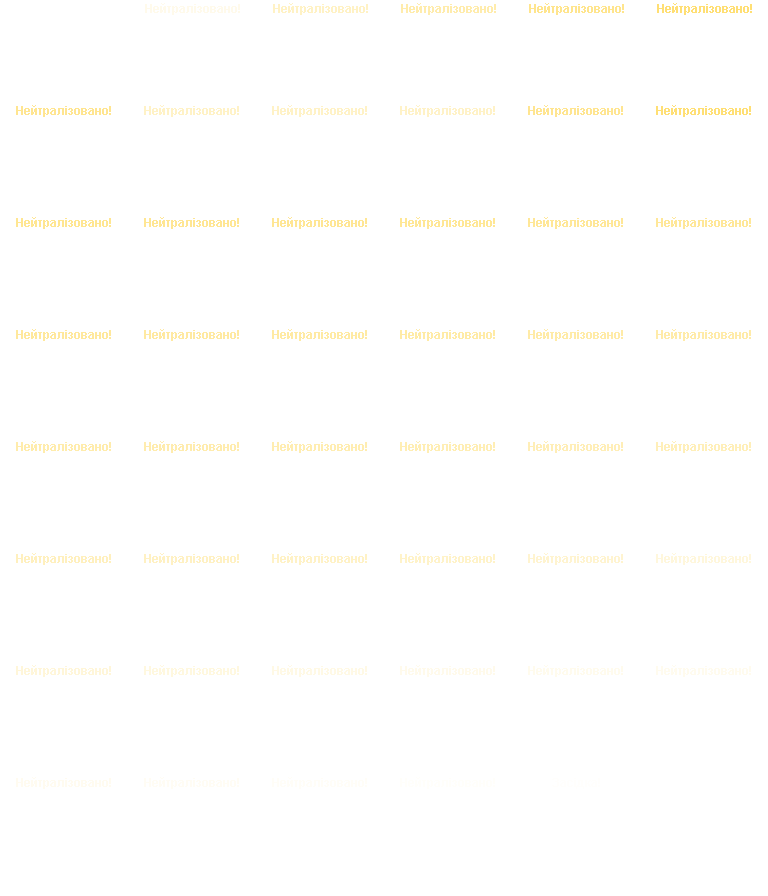
<style>
.page{position:relative;width:768px;height:896px;background:#ffffff}
.page>*{position:absolute;margin:0}
.t1{font:12px "Arial-BoldMT";color:#fffaeb}
.t2{font:12px "Arial-BoldMT";color:#fff2c5}
.t3{font:12px "Arial-BoldMT";color:#ffecac}
.t4{font:12px "Arial-BoldMT";color:#ffe58d}
.t5{font:12px "Arial-BoldMT";color:#ffdf74}
.t6{font:12px "Arial-BoldMT";color:#ffe590}
.t7{font:12px "Arial-BoldMT";color:#fff2c6}
.t8{font:12px "Arial-BoldMT";color:#fff2c7}
.t9{font:12px "Arial-BoldMT";color:#ffe691}
.t10{font:12px "Arial-BoldMT";color:#ffe693}
.t11{font:12px "Arial-BoldMT";color:#ffe694}
.t12{font:12px "Arial-BoldMT";color:#ffe795}
.t13{font:12px "Arial-BoldMT";color:#ffe797}
.t14{font:12px "Arial-BoldMT";color:#ffe798}
.t15{font:12px "Arial-BoldMT";color:#ffe89c}
.t16{font:12px "Arial-BoldMT";color:#ffe9a1}
.t17{font:12px "Arial-BoldMT";color:#ffeaa3}
.t18{font:12px "Arial-BoldMT";color:#ffeba6}
.t19{font:12px "Arial-BoldMT";color:#ffeba7}
.t20{font:12px "Arial-BoldMT";color:#ffeba9}
.t21{font:12px "Arial-BoldMT";color:#ffecae}
.t22{font:12px "Arial-BoldMT";color:#ffedb1}
.t23{font:12px "Arial-BoldMT";color:#ffeeb4}
.t24{font:12px "Arial-BoldMT";color:#ffeeb7}
.t25{font:12px "Arial-BoldMT";color:#ffefb9}
.t26{font:12px "Arial-BoldMT";color:#fff0be}
.t27{font:12px "Arial-BoldMT";color:#fff1c3}
.t28{font:12px "Arial-BoldMT";color:#fff3c9}
.t29{font:12px "Arial-BoldMT";color:#fff4d0}
.t30{font:12px "Arial-BoldMT";color:#fff7dc}
.t31{font:12px "Arial-BoldMT";color:#fff6d9}
.t32{font:12px "Arial-BoldMT";color:#fff8df}
.t33{font:12px "Arial-BoldMT";color:#fff9e5}
.t34{font:12px "Arial-BoldMT";color:#fffbed}
.t35{font:12px "Arial-BoldMT";color:#fffbee}
.t36{font:12px "Arial-BoldMT";color:#fffbf0}
.t37{font:12px "Arial-BoldMT";color:#fffcf4}
.t38{font:12px "Arial-BoldMT";color:#fffdf7}
.t39{font:12px "Arial-BoldMT";color:#fffefa}
</style>
<div class="page">
<p class="t1" style="left:145px;top:3px;width:95px;height:12px">Нейтралізовано!</p>
<p class="t2" style="left:273px;top:3px;width:95px;height:12px">Нейтралізовано!</p>
<p class="t3" style="left:401px;top:3px;width:95px;height:12px">Нейтралізовано!</p>
<p class="t4" style="left:529px;top:3px;width:95px;height:12px">Нейтралізовано!</p>
<p class="t5" style="left:657px;top:3px;width:95px;height:12px">Нейтралізовано!</p>
<p class="t6" style="left:16px;top:105px;width:95px;height:12px">Нейтралізовано!</p>
<p class="t7" style="left:144px;top:105px;width:95px;height:12px">Нейтралізовано!</p>
<p class="t7" style="left:272px;top:105px;width:95px;height:12px">Нейтралізовано!</p>
<p class="t8" style="left:400px;top:105px;width:95px;height:12px">Нейтралізовано!</p>
<p class="t6" style="left:528px;top:105px;width:95px;height:12px">Нейтралізовано!</p>
<p class="t5" style="left:656px;top:105px;width:95px;height:12px">Нейтралізовано!</p>
<p class="t9" style="left:16px;top:217px;width:95px;height:12px">Нейтралізовано!</p>
<p class="t10" style="left:144px;top:217px;width:95px;height:12px">Нейтралізовано!</p>
<p class="t11" style="left:272px;top:217px;width:95px;height:12px">Нейтралізовано!</p>
<p class="t12" style="left:400px;top:217px;width:95px;height:12px">Нейтралізовано!</p>
<p class="t13" style="left:528px;top:217px;width:95px;height:12px">Нейтралізовано!</p>
<p class="t14" style="left:656px;top:217px;width:95px;height:12px">Нейтралізовано!</p>
<p class="t15" style="left:16px;top:329px;width:95px;height:12px">Нейтралізовано!</p>
<p class="t16" style="left:144px;top:329px;width:95px;height:12px">Нейтралізовано!</p>
<p class="t17" style="left:272px;top:329px;width:95px;height:12px">Нейтралізовано!</p>
<p class="t18" style="left:400px;top:329px;width:95px;height:12px">Нейтралізовано!</p>
<p class="t19" style="left:528px;top:329px;width:95px;height:12px">Нейтралізовано!</p>
<p class="t20" style="left:656px;top:329px;width:95px;height:12px">Нейтралізовано!</p>
<p class="t3" style="left:16px;top:441px;width:95px;height:12px">Нейтралізовано!</p>
<p class="t21" style="left:144px;top:441px;width:95px;height:12px">Нейтралізовано!</p>
<p class="t22" style="left:272px;top:441px;width:95px;height:12px">Нейтралізовано!</p>
<p class="t23" style="left:400px;top:441px;width:95px;height:12px">Нейтралізовано!</p>
<p class="t24" style="left:528px;top:441px;width:95px;height:12px">Нейтралізовано!</p>
<p class="t25" style="left:656px;top:441px;width:95px;height:12px">Нейтралізовано!</p>
<p class="t26" style="left:16px;top:553px;width:95px;height:12px">Нейтралізовано!</p>
<p class="t27" style="left:144px;top:553px;width:95px;height:12px">Нейтралізовано!</p>
<p class="t7" style="left:272px;top:553px;width:95px;height:12px">Нейтралізовано!</p>
<p class="t28" style="left:400px;top:553px;width:95px;height:12px">Нейтралізовано!</p>
<p class="t29" style="left:528px;top:553px;width:95px;height:12px">Нейтралізовано!</p>
<p class="t30" style="left:656px;top:553px;width:95px;height:12px">Нейтралізовано!</p>
<p class="t31" style="left:16px;top:665px;width:95px;height:12px">Нейтралізовано!</p>
<p class="t32" style="left:144px;top:665px;width:95px;height:12px">Нейтралізовано!</p>
<p class="t33" style="left:272px;top:665px;width:95px;height:12px">Нейтралізовано!</p>
<p class="t1" style="left:400px;top:665px;width:95px;height:12px">Нейтралізовано!</p>
<p class="t34" style="left:528px;top:665px;width:95px;height:12px">Нейтралізовано!</p>
<p class="t35" style="left:656px;top:665px;width:95px;height:12px">Нейтралізовано!</p>
<p class="t36" style="left:16px;top:777px;width:95px;height:12px">Нейтралізовано!</p>
<p class="t37" style="left:144px;top:777px;width:95px;height:12px">Нейтралізовано!</p>
<p class="t38" style="left:272px;top:777px;width:95px;height:12px">Нейтралізовано!</p>
<p class="t39" style="left:400px;top:777px;width:95px;height:12px">Нейтралізовано!</p>
</div>
